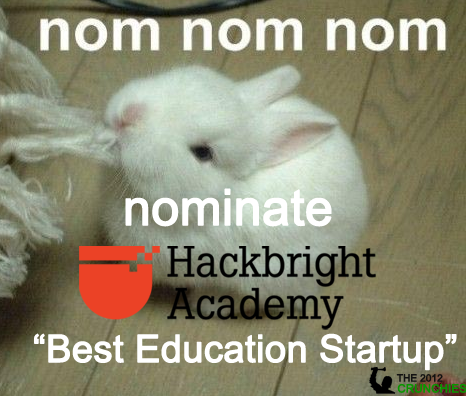
<style>
.page{position:relative;width:466px;height:396px}
.page>*{position:absolute;margin:0}
.t1{font:50px "ArialMT";letter-spacing:-0.015em;color:#ffffff;font-weight:bold}
.t2{font:38px "ArialMT";letter-spacing:-0.015em;color:#ffffff;font-weight:bold}
.t3{font:10px "ArialMT";letter-spacing:-0.015em;color:#121212;font-weight:bold}
.t4{font:11.5px "ArialMT";letter-spacing:-0.015em;color:#0a9500;font-weight:bold}
</style>
<div class="page">
<p class="t1" style="left:125px;top:188px;width:207px;height:39px">nominate</p>
<p class="t2" style="left:34px;top:333px;width:423px;height:38px">“Best Education Startup”</p>
<p class="t3" style="left:396px;top:374px;width:47px;height:8px">THE 2012</p>
<p class="t4" style="left:397px;top:383px;width:70px;height:10px">CRUNCHIES</p>
</div>
